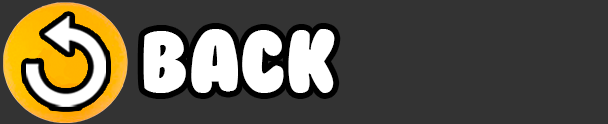
<style>
.page{position:relative;width:608px;height:124px;background:#333333}
.page>*{position:absolute;margin:0}
.t1{font:80px "BubbleGum";color:#ffffff}
</style>
<div class="page">
<p class="t1" style="left:143px;top:29px;width:192px;height:64px">Back</p>
</div>
